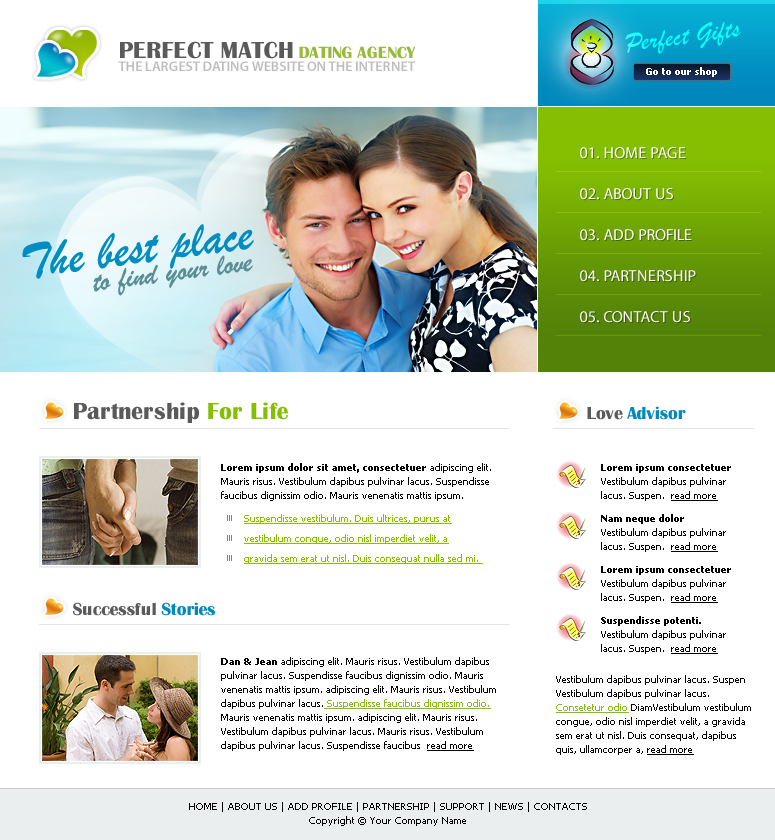
<style>
.page{position:relative;width:775px;height:840px;background:#ffffff}
.page>*{position:absolute;margin:0}
.t1{font:27px "BrushScriptMT";color:#0affff}
.t2{font:24px "BritannicBold";color:#5a5a5a;text-transform:uppercase}
.t3{font:17px "BritannicBold";color:#97ba3a;text-transform:uppercase}
.t4{font:14px "MyriadPro-Semibold";color:#bdbdbd;text-transform:uppercase}
.t5{font:10px "Tahoma-Bold";color:#ffffff}
.t6{font:16px "MyriadPro-Regular";color:#ffffff;text-transform:uppercase}
.t7{font:51px "BrushScriptMT";color:#018dbf}
.t8{font:31px "BrushScriptMT";color:#5a8e95}
.t9{font:24px "BritannicBold";color:#5a5a5a}
.t10{font:24px "BritannicBold";color:#84bf01}
.t11{font:18px "BritannicBold";color:#0089bc}
.t12{font:18px "BritannicBold";color:#5a5a5a}
.t13{font:10px/14px "Tahoma";color:#000000}
.t14{font:10px/14px "Tahoma-Bold";color:#000000}
.t15{font:10px/14px "Tahoma";color:#000000;text-decoration:underline}
.t16{font:10px/20px "Tahoma";color:#84bf01;text-decoration:underline}
.t17{font:10px/14px "Tahoma";color:#84bf01;text-decoration:underline}
</style>
<div class="page">
<p class="t1" style="left:625px;top:22px;width:116px;height:32px;rotate:-7deg">Perfect Gifts</p>
<p class="t2" style="left:120px;top:41px;width:173px;height:18px">perfect match</p>
<p class="t3" style="left:299px;top:46px;width:117px;height:13px">DATING AGENCY</p>
<p class="t4" style="left:118px;top:61px;width:297px;height:10px">THE LARGEST DATING WEBSITE ON THE INTERNET</p>
<p class="t5" style="left:646px;top:67px;width:71px;height:10px">Go to our shop</p>
<p class="t6" style="left:580px;top:147px;width:106px;height:12px">01. HOME PAGE</p>
<p class="t6" style="left:580px;top:188px;width:93px;height:12px">02. ABOUT US</p>
<p class="t7" style="left:22px;top:224px;width:232px;height:55px;rotate:-7deg">The best place</p>
<p class="t6" style="left:580px;top:229px;width:112px;height:12px">03. ADD PROFILE</p>
<p class="t8" style="left:93px;top:255px;width:160px;height:41px;rotate:-7deg">to find your love</p>
<p class="t6" style="left:580px;top:270px;width:116px;height:12px">04. PARTNERSHIP</p>
<p class="t6" style="left:580px;top:311px;width:110px;height:12px">05. CONTACT US</p>
<p class="t9" style="left:74px;top:402px;width:214px;height:21px">Partnership <span class="t10">For Life</span></p>
<p class="t11" style="left:587px;top:406px;width:99px;height:14px"><span class="t12">Love </span>Advisor</p>
<p class="t13" style="left:221px;top:463px;width:270px;height:38px"><span class="t14">Lorem ipsum dolor sit amet, consectetuer</span> adipiscing elit. Mauris risus. Vestibulum dapibus pulvinar lacus. Suspendisse faucibus dignissim odio. Mauris venenatis mattis ipsum.</p>
<p class="t13" style="left:601px;top:464px;width:130px;height:37px"><span class="t14">Lorem ipsum consectetuer</span> <br>Vestibulum dapibus pulvinar lacus. Suspen.  <span class="t15">read more</span></p>
<p class="t16" style="left:244px;top:514px;width:239px;height:50px">Suspendisse vestibulum. Duis ultrices, purus at vestibulum congue, odio nisl imperdiet velit, a gravida sem erat ut nisl. Duis consequat nulla sed mi.</p>
<p class="t13" style="left:601px;top:514px;width:125px;height:38px"><span class="t14">Nam neque dolor</span> <br>Vestibulum dapibus pulvinar lacus. Suspen.  <span class="t15">read more</span></p>
<p class="t13" style="left:601px;top:566px;width:130px;height:37px"><span class="t14">Lorem ipsum consectetuer</span> <br>Vestibulum dapibus pulvinar lacus. Suspen.  <span class="t15">read more</span></p>
<p class="t12" style="left:73px;top:602px;width:142px;height:14px">Successful <span class="t11">Stories</span></p>
<p class="t13" style="left:601px;top:616px;width:125px;height:38px"><span class="t14">Suspendisse potenti.<br></span>Vestibulum dapibus pulvinar lacus. Suspen.  <span class="t15">read more</span></p>
<p class="t13" style="left:221px;top:657px;width:275px;height:94px"><span class="t14">Dan &amp; Jean</span> adipiscing elit. Mauris risus. Vestibulum dapibus pulvinar lacus. Suspendisse faucibus dignissim odio. Mauris venenatis mattis ipsum. adipiscing elit. Mauris risus. Vestibulum dapibus pulvinar lacus.<span class="t17"> Suspendisse faucibus dignissim odio. </span>Mauris venenatis mattis ipsum. adipiscing elit. Mauris risus. Vestibulum dapibus pulvinar lacus. Mauris risus. Vestibulum dapibus pulvinar lacus. Suspendisse faucibus  <span class="t15">read more</span></p>
<p class="t13" style="left:556px;top:675px;width:195px;height:80px">Vestibulum dapibus pulvinar lacus. Suspen Vestibulum dapibus pulvinar lacus.<span class="t17"> Consetetur odio </span>DiamVestibulum vestibulum congue, odio nisl imperdiet velit, a gravida sem erat ut nisl. Duis consequat, dapibus quis, ullamcorper a, <span class="t15">read more</span></p>
<p class="t13" style="left:189px;top:802px;width:398px;height:24px;text-align:center">HOME | ABOUT US | ADD PROFILE | PARTNERSHIP | SUPPORT | NEWS | CONTACTS<br>Copyright © Your Company Name</p>
</div>
